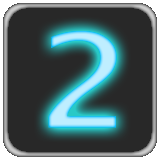
<style>
.page{position:relative;width:160px;height:160px;background:#282828}
.page>*{position:absolute;margin:0}
.t1{font:130px "LucidaSans";scale:1.2 1}
</style>
<div class="page">
<p class="t1" style="left:48px;top:31px;width:69px;height:97px">2</p>
</div>
